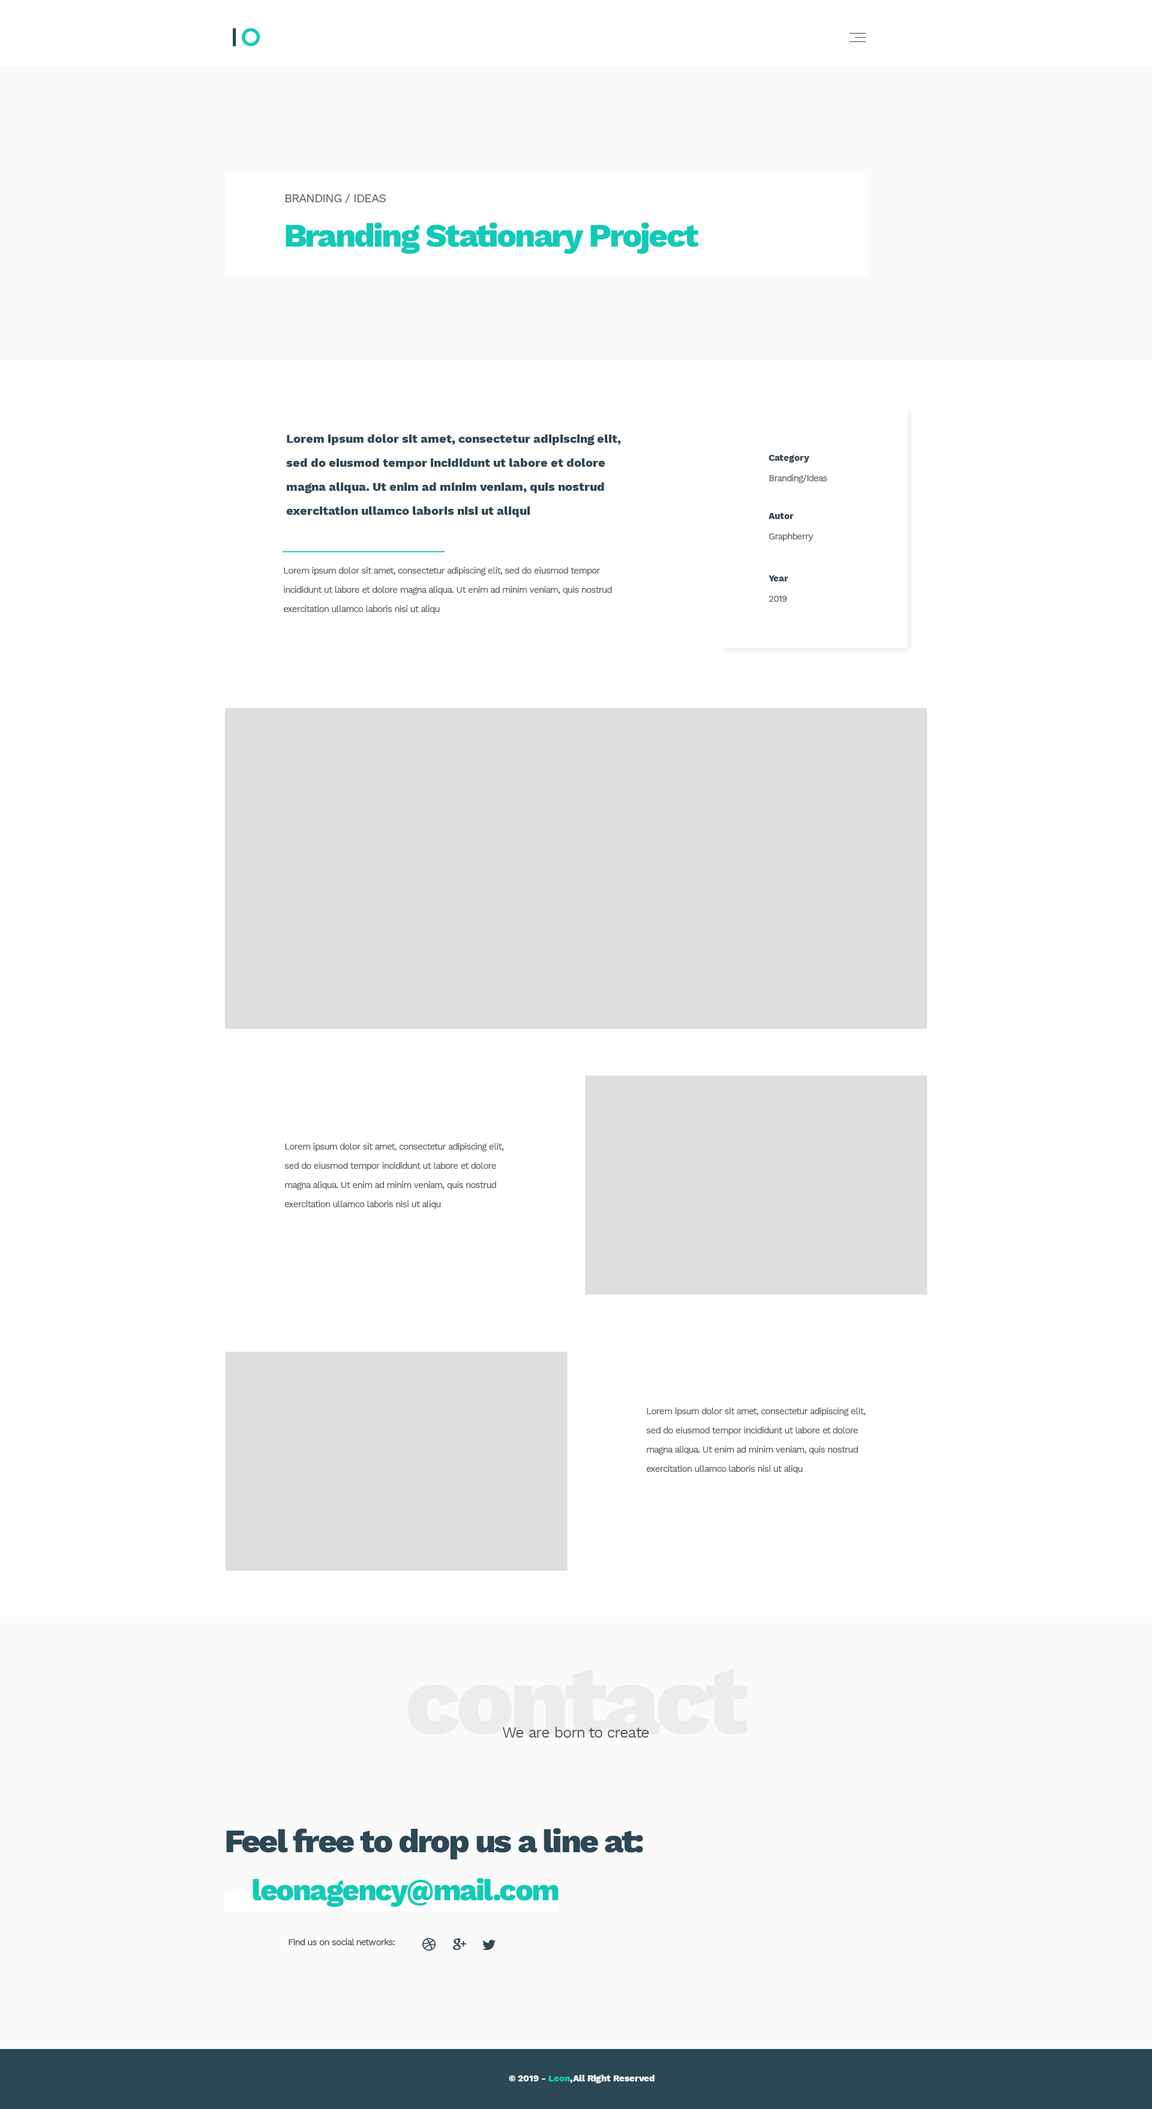
<style>
.page{position:relative;width:1152px;height:2109px;background:#ffffff}
.page>*{position:absolute;margin:0}
.t1{font:12px "WorkSans-Regular";letter-spacing:-0.05em;color:#575757}
.t2{font:33.3px "WorkSans-ExtraBold";letter-spacing:-0.05em;color:#10cab7}
.t3{font:12px/24px "WorkSans-ExtraBold";color:#334752}
.t4{font:9px "WorkSans-ExtraBold";color:#334752}
.t5{font:9px "WorkSans-Regular";letter-spacing:-0.05em;color:#575757}
.t6{font:9px/19.2px "WorkSans-Regular";letter-spacing:-0.05em;color:#575757}
.t7{font:97.1px "WorkSans-ExtraBold";letter-spacing:-0.05em;color:#ebeced}
.t8{font:15px "WorkSans-Regular";letter-spacing:-0.05em;color:#575757}
.t9{font:33.3px "WorkSans-ExtraBold";letter-spacing:-0.05em;color:#2c4755}
.t10{font:30px "WorkSans-ExtraBold";letter-spacing:-0.05em;color:#10cab7}
.t11{font:9px "WorkSans-Regular";letter-spacing:-0.05em;color:#334752}
.t12{font:9px "WorkSans-ExtraBold";color:#ffffff}
.t13{font:9px "WorkSans-ExtraBold";color:#10cab7}
</style>
<div class="page">
<p class="t1" style="left:286px;top:194px;width:100px;height:9px">BRANDING / IDEAS</p>
<p class="t2" style="left:286px;top:223px;width:412px;height:31px">Branding Stationary Project</p>
<p class="t3" style="left:286px;top:434px;width:335px;height:83px">Lorem ipsum dolor sit amet, consectetur adipiscing elit, <br>sed do eiusmod tempor incididunt ut labore et dolore <br>magna aliqua. Ut enim ad minim veniam, quis nostrud <br>exercitation ullamco laboris nisi ut aliqui</p>
<p class="t4" style="left:769px;top:454px;width:40px;height:9px">Category</p>
<p class="t5" style="left:769px;top:475px;width:58px;height:8px">Branding/Ideas</p>
<p class="t4" style="left:769px;top:512px;width:25px;height:7px">Autor</p>
<p class="t5" style="left:769px;top:533px;width:45px;height:8px">Graphberry</p>
<p class="t6" style="left:283px;top:567px;width:329px;height:47px">Lorem ipsum dolor sit amet, consectetur adipiscing elit, sed do eiusmod tempor <br>incididunt ut labore et dolore magna aliqua. Ut enim ad minim veniam, quis nostrud <br>exercitation ullamco laboris nisi ut aliqu</p>
<p class="t4" style="left:769px;top:575px;width:19px;height:6px">Year</p>
<p class="t5" style="left:769px;top:596px;width:18px;height:6px">2019</p>
<p class="t6" style="left:284px;top:1143px;width:219px;height:66px">Lorem ipsum dolor sit amet, consectetur adipiscing elit, <br>sed do eiusmod tempor incididunt ut labore et dolore <br>magna aliqua. Ut enim ad minim veniam, quis nostrud <br>exercitation ullamco laboris nisi ut aliqu</p>
<p class="t6" style="left:646px;top:1408px;width:219px;height:66px">Lorem ipsum dolor sit amet, consectetur adipiscing elit, <br>sed do eiusmod tempor incididunt ut labore et dolore <br>magna aliqua. Ut enim ad minim veniam, quis nostrud <br>exercitation ullamco laboris nisi ut aliqu</p>
<p class="t7" style="left:407px;top:1669px;width:341px;height:66px">contact</p>
<p class="t8" style="left:502px;top:1727px;width:147px;height:11px">We are born to create</p>
<p class="t9" style="left:226px;top:1828px;width:417px;height:31px">Feel free to drop us a line at:</p>
<p class="t10" style="left:253px;top:1878px;width:306px;height:29px">leonagency@mail.com</p>
<p class="t11" style="left:289px;top:1939px;width:106px;height:6px">Find us on social networks:</p>
<p class="t12" style="left:509px;top:2075px;width:146px;height:8px">© 2019 - <span class="t13">Leon</span>,All Right Reserved</p>
</div>
